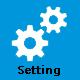
<style>
.page{position:relative;width:80px;height:80px;background:#0096dc}
.page>*{position:absolute;margin:0}
.t1{font:11.1px "MicrosoftYaHei";color:#000000;font-weight:bold}
</style>
<div class="page">
<p class="t1" style="left:18px;top:65px;width:42px;height:11px">Setting</p>
</div>
